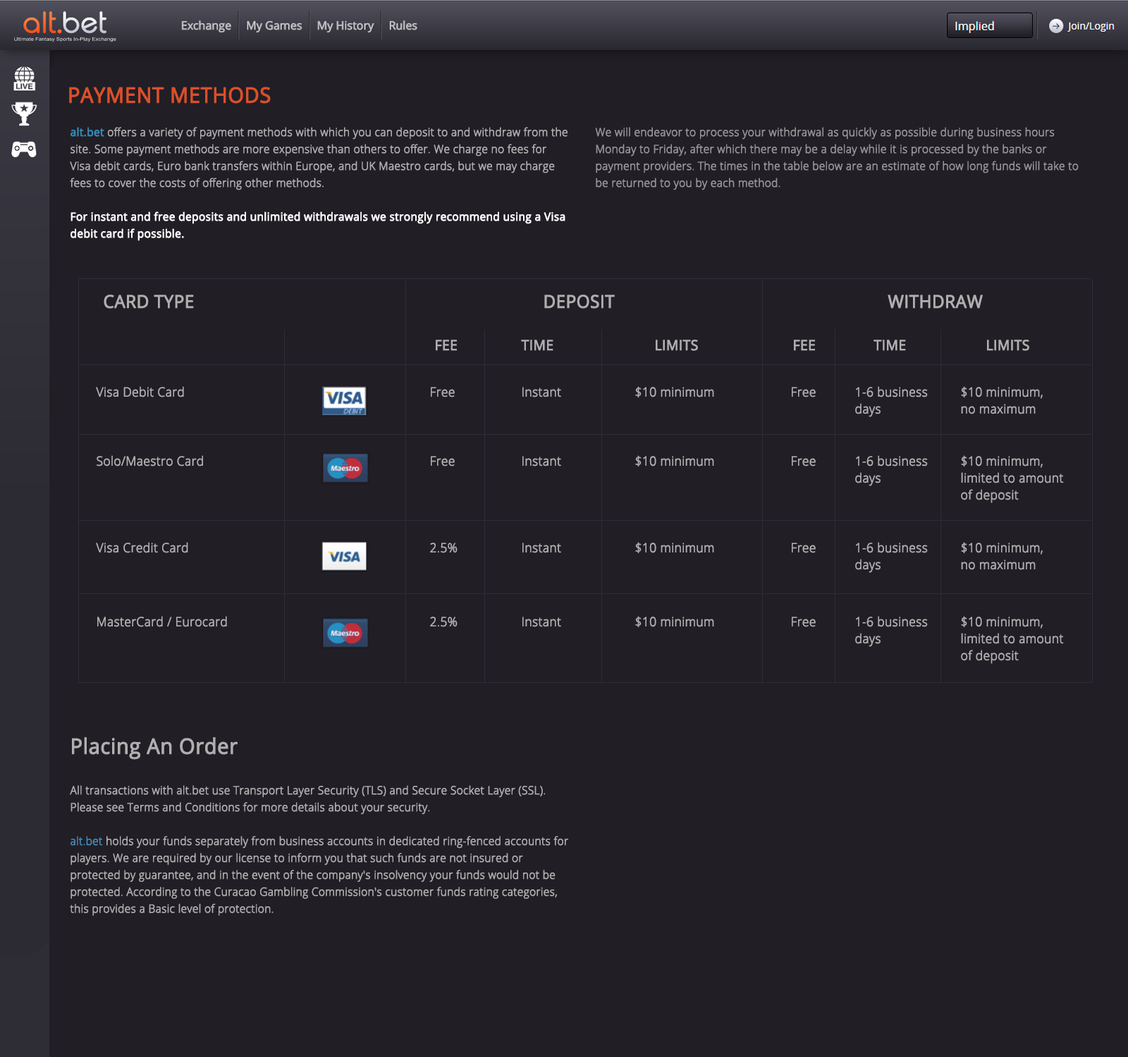
<style>
.page{position:relative;width:1128px;height:1057px;background:#211e25}
.page>*{position:absolute;margin:0}
.t1{font:21.1px "OpenSans";color:#d9502a;font-weight:bold;scale:0.96 1}
.t2{font:11.3px/16.9px "OpenSans-Light";color:#b0afb0;font-weight:bold;scale:0.96 1}
.t3{font:11.3px/16.9px "OpenSans";color:#368ab8;font-weight:bold;scale:0.96 1}
.t4{font:11.3px/16.9px "OpenSans";color:#fffeff;font-weight:bold;scale:0.96 1}
.t5{font:11.3px/16.9px "OpenSans-Light";color:#969596;font-weight:bold;scale:0.96 1}
.t6{font:17.6px "OpenSans";color:#b0afb0;font-weight:bold;scale:0.96 1}
.t7{font:14.1px "OpenSans";color:#b0afb0;font-weight:bold;scale:0.96 1}
.t8{font:12.7px "OpenSans-Light";color:#b0afb0;font-weight:bold;scale:0.96 1}
.t9{font:12.7px/16.9px "OpenSans-Light";color:#b0afb0;font-weight:bold;scale:0.96 1}
.t10{font:21.1px "OpenSans";color:#b0afb0;font-weight:bold;scale:0.96 1}
.t11{font:11.3px/16.9px "OpenSans-Light";color:#448cb9;font-weight:bold;scale:0.96 1}
</style>
<div class="page">
<p class="t1" style="left:69px;top:87px;width:202px;height:17px">PAYMENT METHODS</p>
<p class="t2" style="left:70px;top:127px;width:497px;height:114px"><span class="t3">alt.bet </span>offers a variety of payment methods with which you can deposit to and withdraw from the site. Some payment methods are more expensive than others to offer. We charge no fees for Visa debit cards, Euro bank transfers within Europe, and UK Maestro cards, but we may charge fees to cover the costs of offering other methods.<br><br><span class="t4">For instant and free deposits and unlimited withdrawals we strongly recommend using a Visa debit card if possible.</span></p>
<p class="t5" style="left:595px;top:127px;width:483px;height:63px">We will endeavor to process your withdrawal as quickly as possible during business hours Monday to Friday, after which there may be a delay while it is processed by the banks or payment providers. The times in the table below are an estimate of how long funds will take to be returned to you by each method.</p>
<p class="t6" style="left:104px;top:295px;width:90px;height:14px">CARD TYPE</p>
<p class="t6" style="left:544px;top:295px;width:71px;height:14px">DEPOSIT</p>
<p class="t6" style="left:887px;top:295px;width:96px;height:14px">WITHDRAW</p>
<p class="t7" style="left:436px;top:340px;width:21px;height:11px">FEE</p>
<p class="t7" style="left:521px;top:340px;width:32px;height:11px">TIME</p>
<p class="t7" style="left:656px;top:340px;width:42px;height:11px">LIMITS</p>
<p class="t7" style="left:794px;top:340px;width:21px;height:11px">FEE</p>
<p class="t7" style="left:873px;top:340px;width:33px;height:11px">TIME</p>
<p class="t7" style="left:987px;top:340px;width:42px;height:11px">LIMITS</p>
<p class="t8" style="left:96px;top:386px;width:88px;height:12px">Visa Debit Card</p>
<p class="t8" style="left:431px;top:387px;width:24px;height:11px">Free</p>
<p class="t8" style="left:522px;top:387px;width:39px;height:11px">Instant</p>
<p class="t8" style="left:635px;top:386px;width:79px;height:12px">$10 minimum</p>
<p class="t8" style="left:792px;top:387px;width:24px;height:11px">Free</p>
<p class="t9" style="left:855px;top:386px;width:73px;height:31px">1-6 business days</p>
<p class="t9" style="left:961px;top:386px;width:82px;height:28px">$10 minimum, no maximum</p>
<p class="t8" style="left:97px;top:455px;width:106px;height:12px">Solo/Maestro Card</p>
<p class="t8" style="left:431px;top:456px;width:24px;height:11px">Free</p>
<p class="t8" style="left:522px;top:456px;width:39px;height:11px">Instant</p>
<p class="t8" style="left:635px;top:455px;width:79px;height:12px">$10 minimum</p>
<p class="t8" style="left:792px;top:456px;width:24px;height:11px">Free</p>
<p class="t9" style="left:855px;top:455px;width:73px;height:31px">1-6 business days</p>
<p class="t9" style="left:961px;top:455px;width:103px;height:48px">$10 minimum, limited to amount of deposit</p>
<p class="t8" style="left:96px;top:542px;width:92px;height:11px">Visa Credit Card</p>
<p class="t8" style="left:430px;top:543px;width:27px;height:10px">2.5%</p>
<p class="t8" style="left:522px;top:543px;width:39px;height:10px">Instant</p>
<p class="t8" style="left:635px;top:542px;width:79px;height:11px">$10 minimum</p>
<p class="t8" style="left:792px;top:543px;width:24px;height:10px">Free</p>
<p class="t9" style="left:855px;top:542px;width:73px;height:31px">1-6 business days</p>
<p class="t9" style="left:961px;top:542px;width:82px;height:28px">$10 minimum, <br>no maximum</p>
<p class="t8" style="left:97px;top:616px;width:130px;height:11px">MasterCard / Eurocard</p>
<p class="t8" style="left:430px;top:617px;width:27px;height:10px">2.5%</p>
<p class="t8" style="left:522px;top:617px;width:39px;height:10px">Instant</p>
<p class="t8" style="left:635px;top:616px;width:79px;height:11px">$10 minimum</p>
<p class="t8" style="left:792px;top:617px;width:24px;height:10px">Free</p>
<p class="t9" style="left:855px;top:616px;width:73px;height:31px">1-6 business days</p>
<p class="t9" style="left:961px;top:616px;width:103px;height:48px">$10 minimum, limited to amount of deposit</p>
<p class="t10" style="left:72px;top:737px;width:166px;height:23px">Placing An Order (Bet)</p>
<p class="t2" style="left:70px;top:785px;width:498px;height:131px">All transactions with alt.bet use Transport Layer Security (TLS) and Secure Socket Layer (SSL). Please see Terms and Conditions for more details about your security.<br><br><span class="t11">alt.bet </span>holds your funds separately from business accounts in dedicated ring-fenced accounts for players. We are required by our license to inform you that such funds are not insured or protected by guarantee, and in the event of the company's insolvency your funds would not be protected. According to the Curacao Gambling Commission's customer funds rating categories, this provides a Basic level of protection.</p>
</div>
